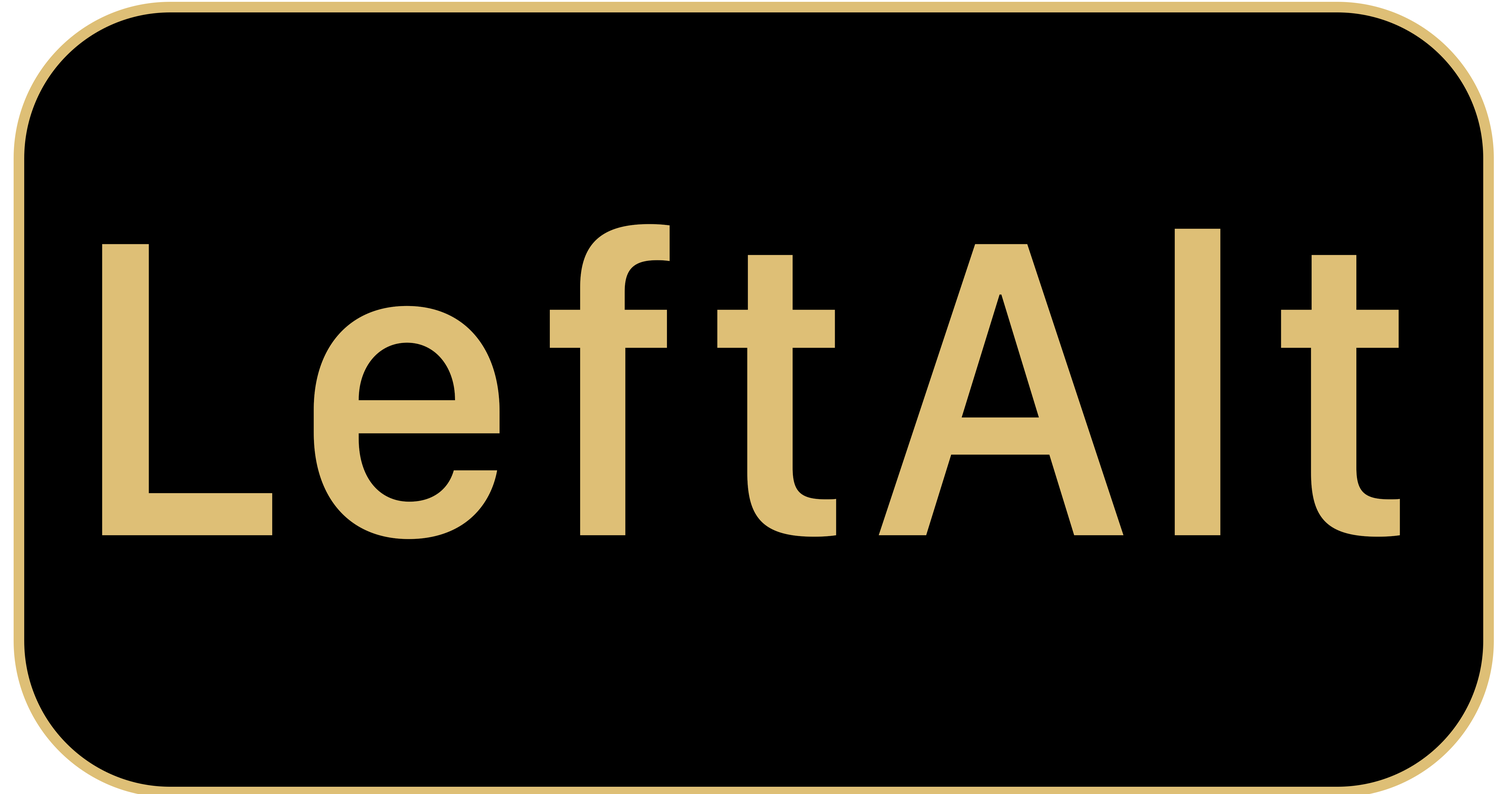
<style>
.page{position:relative;width:1502px;height:794px;background:#000000}
.page>*{position:absolute;margin:0}
.t1{font:436.7px "SFCompactDisplay-Medium";letter-spacing:0.04em;color:#debf76;scale:0.96 1}
</style>
<div class="page">
<p class="t1" style="left:102px;top:224px;width:1298px;height:315px">LeftAlt</p>
</div>
